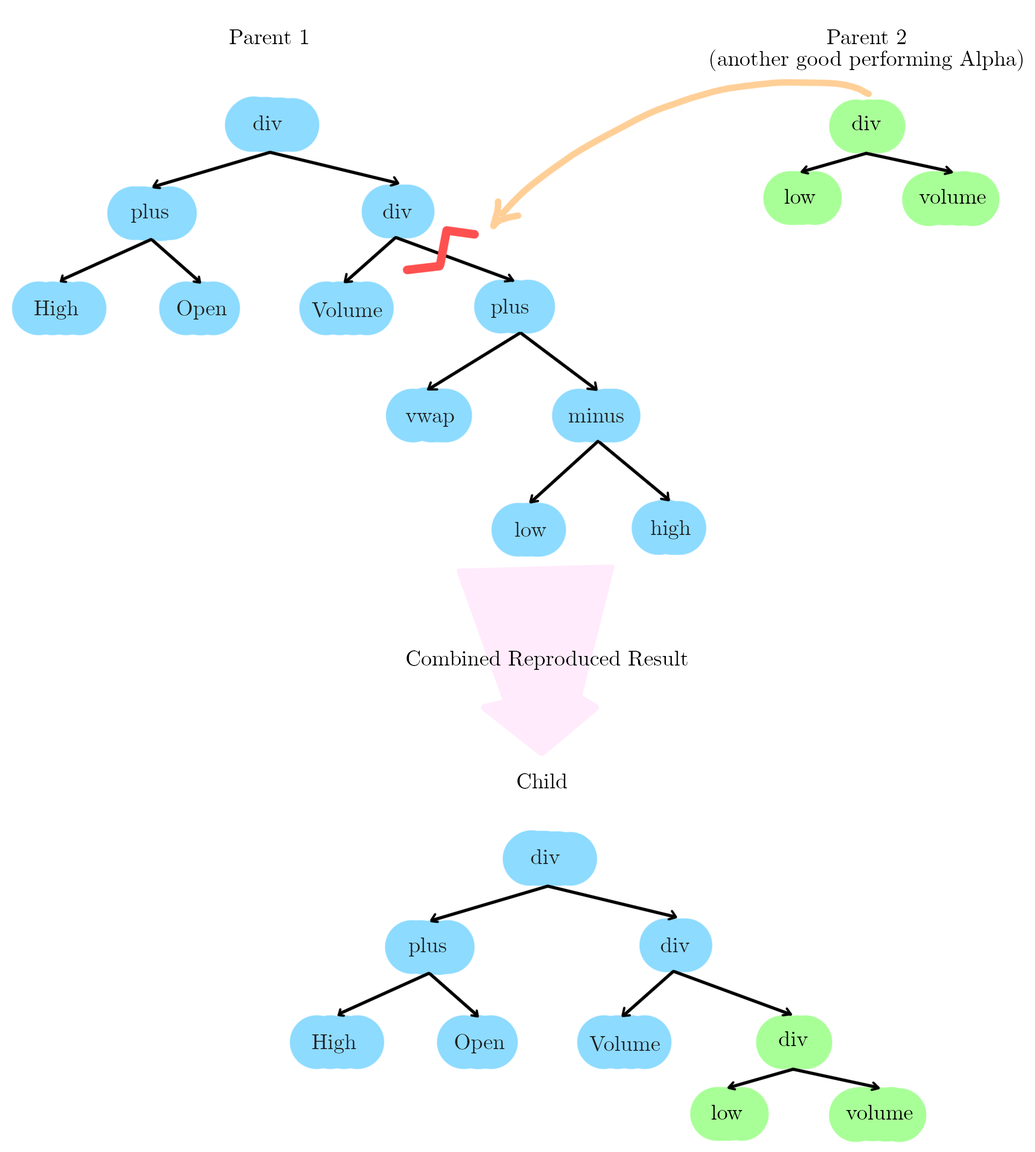
<style>
.page{position:relative;width:1035px;height:1152px;background:#ffffff}
.page>*{position:absolute;margin:0}
.t1{font:21.6px "CMUSerif-Roman";color:#000000}
.t2{font:21.6px/21.6px "CMUSerif-Roman";color:#000000}
.t3{font:21.6px "CMUSerif-Roman";color:#222222}
</style>
<div class="page">
<p class="t1" style="left:229px;top:29px;width:79px;height:15px">Parent 1</p>
<p class="t2" style="left:710px;top:29px;width:313px;height:42px;text-align:center">Parent 2<br>(another good performing Alpha)</p>
<p class="t3" style="left:253px;top:115px;width:29px;height:15px">div</p>
<p class="t1" style="left:852px;top:115px;width:29px;height:15px">div</p>
<p class="t1" style="left:784px;top:189px;width:31px;height:15px">low</p>
<p class="t1" style="left:919px;top:189px;width:66px;height:15px">volume</p>
<p class="t3" style="left:131px;top:204px;width:37px;height:19px">plus</p>
<p class="t3" style="left:383px;top:204px;width:29px;height:14px">div</p>
<p class="t3" style="left:34px;top:301px;width:44px;height:19px">High</p>
<p class="t3" style="left:177px;top:300px;width:50px;height:20px">Open</p>
<p class="t3" style="left:312px;top:302px;width:70px;height:16px">Volume</p>
<p class="t3" style="left:491px;top:299px;width:37px;height:19px">plus</p>
<p class="t3" style="left:406px;top:413px;width:48px;height:14px">vwap</p>
<p class="t3" style="left:568px;top:408px;width:55px;height:15px">minus</p>
<p class="t3" style="left:651px;top:520px;width:39px;height:19px">high</p>
<p class="t3" style="left:515px;top:522px;width:31px;height:15px">low</p>
<p class="t1" style="left:406px;top:651px;width:281px;height:19px">Combined Reproduced Result</p>
<p class="t1" style="left:517px;top:773px;width:50px;height:16px">Child</p>
<p class="t3" style="left:531px;top:850px;width:29px;height:14px">div</p>
<p class="t3" style="left:409px;top:938px;width:37px;height:19px">plus</p>
<p class="t3" style="left:661px;top:938px;width:29px;height:15px">div</p>
<p class="t3" style="left:312px;top:1035px;width:44px;height:19px">High</p>
<p class="t3" style="left:455px;top:1034px;width:49px;height:20px">Open</p>
<p class="t3" style="left:590px;top:1036px;width:70px;height:16px">Volume</p>
<p class="t1" style="left:779px;top:1032px;width:29px;height:14px">div</p>
<p class="t1" style="left:711px;top:1105px;width:31px;height:15px">low</p>
<p class="t1" style="left:846px;top:1105px;width:66px;height:15px">volume</p>
</div>
